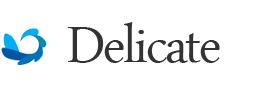
<style>
.page{position:relative;width:260px;height:90px;background:#ffffff}
.page>*{position:absolute;margin:0}
.t1{font:75px "ArabicTypesetting";letter-spacing:-0.03em;color:#333333}
</style>
<div class="page">
<p class="t1" style="left:67px;top:22px;width:153px;height:41px">Delicate</p>
</div>
